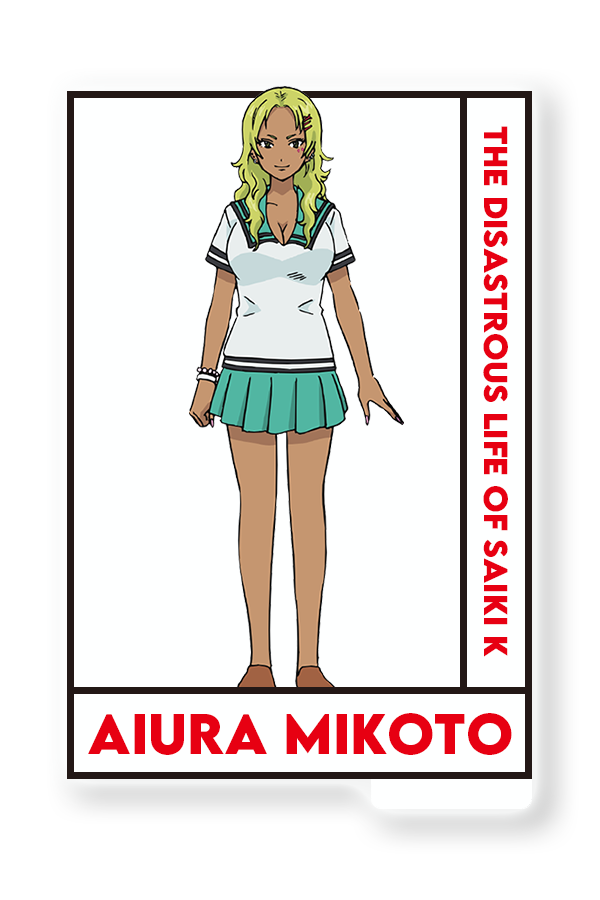
<style>
.page{position:relative;width:600px;height:900px;background:#feffff}
.page>*{position:absolute;margin:0}
.t1{font:29.6px "LEMONMILK-Bold";color:#e70012}
.t2{font:50.5px "LEMONMILK-Bold";color:#e70012}
</style>
<div class="page">
<p class="t1" style="left:483px;top:126px;width:25px;height:531px;rotate:90deg">THE disastrous Life of saiki K</p>
<p class="t2" style="left:88px;top:713px;width:424px;height:42px">Aiura Mikoto</p>
</div>
